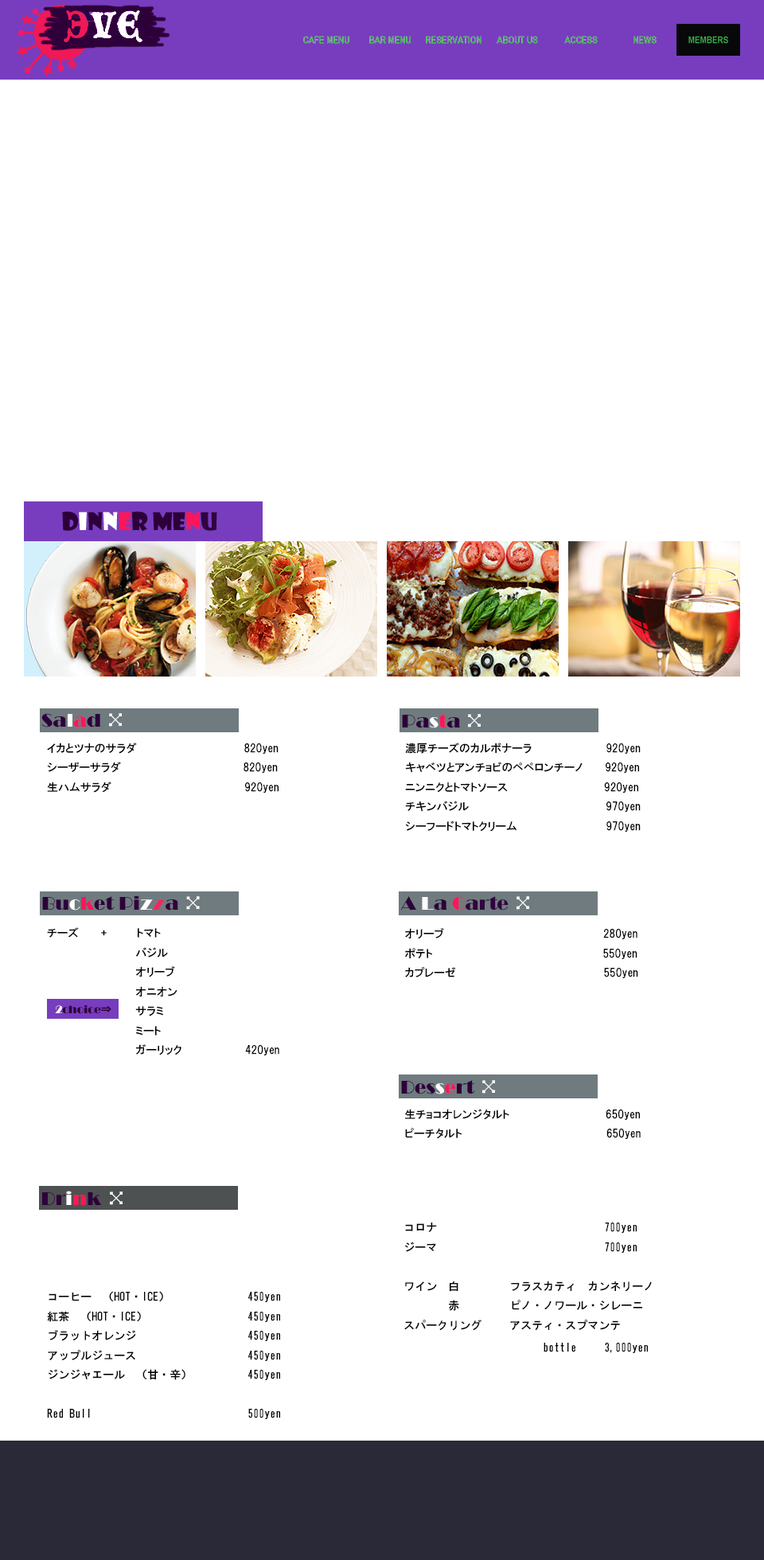
<style>
.page{position:relative;width:764px;height:1560px;background:#ffffff}
.page>*{position:absolute;margin:0}
.t1{font:23.9px "ShowcardGothic-Reg";color:#2e003a}
.t2{font:23.9px "ShowcardGothic-Reg";color:#ffffff}
.t3{font:23.9px "ShowcardGothic-Reg";color:#fe1659}
.t4{font:23.9px "ShowcardGothic-Reg";color:#310340}
.t5{font:19.1px "Broadway";color:#2e003a}
.t6{font:19.1px "Broadway";color:#ffffff}
.t7{font:19.1px "Broadway";color:#fe1659}
.t8{font:19.1px "BookshelfSymbolSeven";color:#ffffff}
.t9{font:11.1px "HGPGothicE";color:#000000}
.t10{font:19.1px "Broadway";color:#ee285e}
.t11{font:19.1px "Broadway";color:#310340}
.t12{font:11.1px "Broadway";color:#2e003a}
.t13{font:11.1px "Broadway";color:#ffffff}
.t14{font:11.1px "HGPGothicE";color:#2e003a}
.t15{font:11.1px "HGGothicE";color:#000000}
</style>
<div class="page">
<p class="t1" style="left:62px;top:511px;width:155px;height:21px">D<span class="t2">i</span>n<span class="t2">n</span><span class="t3">e</span>r ME<span class="t3">N</span><span class="t4">U</span></p>
<p class="t5" style="left:41px;top:713px;width:81px;height:15px">Sa<span class="t6">l</span><span class="t7">a</span>d <span class="t8">i</span></p>
<p class="t5" style="left:402px;top:714px;width:79px;height:14px">Pa<span class="t6">s</span><span class="t7">t</span>a <span class="t8">i</span></p>
<p class="t9" style="left:47px;top:743px;width:232px;height:50px">イカとツナのサラダ　　　　                     820yen<br>シーザーサラダ　　　                           820yen<br>生ハムサラダ　　　　　　　                      920yen</p>
<p class="t9" style="left:405px;top:743px;width:236px;height:89px">濃厚チーズのカルボナーラ　　　　　　　　　　920yen<br>キャベツとアンチョビのペペロンチーノ　　　920yen<br>ニンニクとトマトソース　　　　　　　　　　　　  920yen<br>チキンバジル　　　　　　　　　　　　　　　　　 　970yen<br>シーフードトマトクリーム　　　　　　　　　　 　 970yen</p>
<p class="t5" style="left:42px;top:896px;width:158px;height:15px">Bu<span class="t6">c</span><span class="t7">k</span>et Pi<span class="t6">z</span><span class="t10">z</span>a <span class="t8">i</span></p>
<p class="t11" style="left:400px;top:896px;width:129px;height:15px"><span class="t5">A </span><span class="t6">L</span><span class="t5">a </span><span class="t7">C</span>arte <span class="t8">i</span></p>
<p class="t9" style="left:47px;top:927px;width:232px;height:129px">チーズ　　　+　　　　トマト<br>　　　　　　　　　　　　バジル<br>　　　　　　　　　　　　オリーブ<br>　　　　　　　　　　　　オニオン<br>　　　　　　　　　　　　サラミ<br>　　　　　　　　　　　　ミート<br>　　　　　　　　　　　　ガーリック　　　       　　420yen</p>
<p class="t9" style="left:405px;top:928px;width:233px;height:50px">オリーブ　　　　　　　　                           280yen<br>ポテト　　　　　　　　　                            550yen<br>カプレーゼ　　　　　　                            550yen</p>
<p class="t12" style="left:55px;top:1005px;width:56px;height:9px"><span class="t13">2</span>choice<span class="t14">⇒</span></p>
<p class="t5" style="left:401px;top:1080px;width:94px;height:15px">Des<span class="t6">s</span><span class="t7">e</span>rt <span class="t8">i</span></p>
<p class="t9" style="left:405px;top:1109px;width:236px;height:30px">生チョコオレンジタルト　　　　                  650yen<br>ピーチタルト　　　　　　　　　　                   650yen</p>
<p class="t5" style="left:42px;top:1191px;width:81px;height:14px">Dr<span class="t6">i</span><span class="t7">n</span>k <span class="t8">i</span></p>
<p class="t15" style="left:404px;top:1223px;width:248px;height:130px">コロナ                              700yen<br>ジーマ                              700yen<br><br>ワイン  白    　   フラスカティ　カンネリーノ<br>　　　　赤　　     ピノ・ノワール・シレーニ<br>スパークリング　   アスティ・スプマンテ<br>　　　　　　　　　　　   bottle     3,000yen</p>
<p class="t15" style="left:47px;top:1291px;width:233px;height:128px">コーヒー　（HOT・ICE）              450yen<br>紅茶　（HOT・ICE）                  450yen<br>ブラットオレンジ                    450yen<br>アップルジュース                    450yen<br>ジンジャエール　（甘・辛）          450yen<br><br>Red Bull                            500yen</p>
</div>
